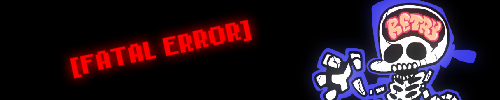
<style>
.page{position:relative;width:500px;height:100px;background:#000000}
.page>*{position:absolute;margin:0}
.t1{font:20.5px "NokiaCellphoneFC-Small";color:#ff0000}
</style>
<div class="page">
<p class="t1" style="left:70px;top:20px;width:182px;height:59px;rotate:-12deg">[FATAL ERROR]</p>
</div>
